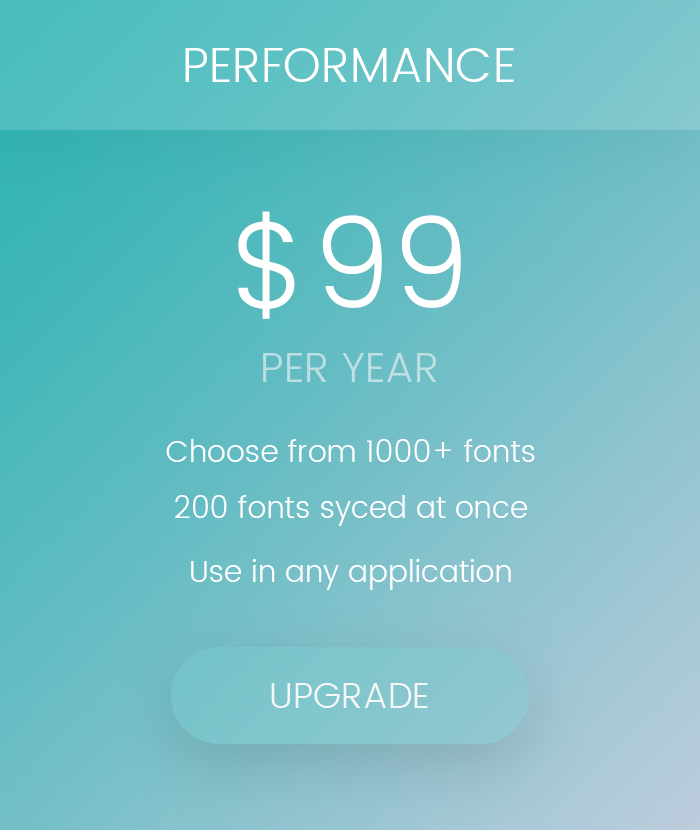
<style>
.page{position:relative;width:700px;height:830px}
.page>*{position:absolute;margin:0}
.t1{font:48px "Poppins-Light";color:#ffffff}
.t2{font:124px "Poppins-Light";color:#ffffff}
.t3{font:42px "Poppins-Light";color:#bddfe3}
.t4{font:30px "Poppins-Light";color:#ffffff}
.t5{font:36px "Poppins-Light";color:#f7f7f7}
</style>
<div class="page">
<p class="t1" style="left:185px;top:48px;width:329px;height:34px">PERFORMANCE</p>
<p class="t2" style="left:238px;top:211px;width:223px;height:108px">$99</p>
<p class="t3" style="left:263px;top:353px;width:174px;height:29px">PER YEAR</p>
<p class="t4" style="left:166px;top:439px;width:369px;height:23px">Choose from 1000+ fonts</p>
<p class="t4" style="left:175px;top:495px;width:353px;height:31px">200 fonts syced at once</p>
<p class="t4" style="left:191px;top:559px;width:320px;height:31px">Use in any application</p>
<p class="t5" style="left:271px;top:683px;width:157px;height:25px">UPGRADE</p>
</div>
